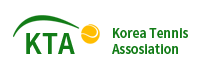
<style>
.page{position:relative;width:200px;height:76px;background:#ffffff}
.page>*{position:absolute;margin:0}
.t1{font:12.8px/15.6px "NotoSansKR-Bold";color:#127c17;scale:0.93 1}
.t2{font:27.8px "NotoSansKR-Bold";color:#127c17;scale:0.93 1}
</style>
<div class="page">
<p class="t1" style="left:112px;top:28px;width:76px;height:26px">Korea Tennis<br>Assosiation</p>
<p class="t2" style="left:26px;top:33px;width:49px;height:21px">KTA</p>
</div>
